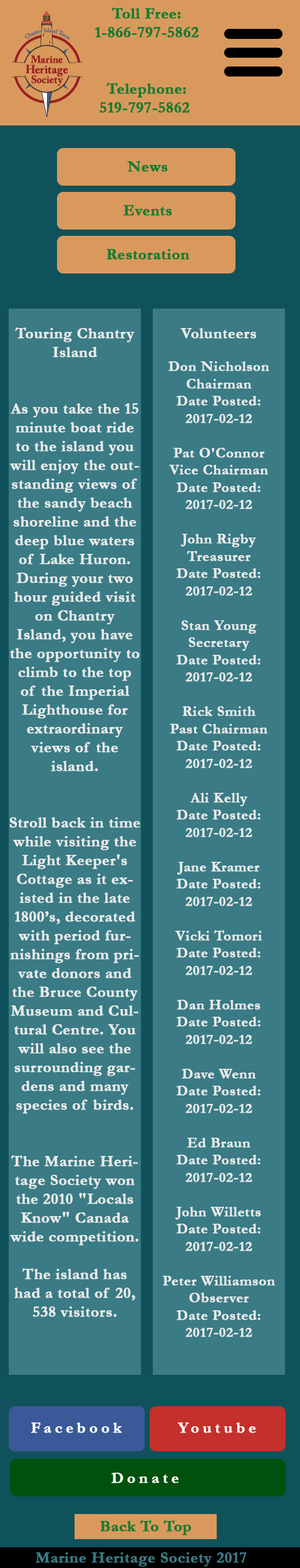
<style>
.page{position:relative;width:300px;height:1568px;background:#3a7b85}
.page>*{position:absolute;margin:0}
.t1{font:15.7px "Garamond-Bold";color:#197b30;font-weight:bold}
.t2{font:15.7px "Garamond-Bold";letter-spacing:-0.005em;color:#ebebeb;font-weight:bold}
.t3{font:14.4px "Garamond-Bold";letter-spacing:-0.005em;color:#ebebeb;font-weight:bold}
.t4{font:15.7px "Garamond-Bold";letter-spacing:0.2em;color:#fefefe;font-weight:bold}
.t5{font:15.7px "Garamond-Bold";letter-spacing:0.2em;color:#ffffff;font-weight:bold}
.t6{font:15.7px "Garamond-Bold";color:#3a7b85;font-weight:bold}
</style>
<div class="page">
<p class="t1" style="left:95px;top:8px;width:104px;height:30px;text-align:center">Toll Free:<br>1-866-797-5862</p>
<p class="t1" style="left:100px;top:83px;width:90px;height:30px;text-align:center">Telephone:<br>519-797-5862</p>
<p class="t1" style="left:127px;top:161px;width:41px;height:11px">News</p>
<p class="t1" style="left:124px;top:205px;width:48px;height:11px">Events</p>
<p class="t1" style="left:107px;top:249px;width:83px;height:11px">Restoration</p>
<p class="t2" style="left:9px;top:327px;width:131px;height:990px;text-align:center">Touring Chantry Island<br><br><br>As you take the 15 minute boat ride to the island you will enjoy the outstanding views of the sandy beach shoreline and the deep blue waters of Lake Huron. During your two hour guided visit on Chantry Island, you have the opportunity to climb to the top of the Imperial Lighthouse for extraordinary views of the island. <br><br><br>Stroll back in time while visiting the Light Keeper's Cottage as it existed in the late 1800’s, decorated with period furnishings from private donors and the Bruce County Museum and Cultural Centre. You will also see the surrounding gardens and many species of birds.<br><br><br>The Marine Heritage Society won the 2010 "Locals Know" Canada wide competition.<br><br>The island has had a total of 20, 538 visitors.</p>
<p class="t3" style="left:162px;top:328px;width:113px;height:1009px;text-align:center"><span class="t2"><br>Volunteers<br><br></span>Don Nicholson<br>Chairman<br>Date Posted: 2017-02-12<br><br>Pat O'Connor<br>Vice Chairman<br>Date Posted: 2017-02-12<br><br>John Rigby<br>Treasurer<br>Date Posted: 2017-02-12<br><br>Stan Young<br>Secretary<br>Date Posted: 2017-02-12<br><br>Rick Smith<br>Past Chairman<br>Date Posted: 2017-02-12<br><br>Ali Kelly<br>Date Posted: 2017-02-12<br><br>Jane Kramer<br>Date Posted: 2017-02-12<br><br>Vicki Tomori<br>Date Posted: 2017-02-12<br><br>Dan Holmes<br>Date Posted: 2017-02-12<br><br>Dave Wenn<br>Date Posted: 2017-02-12<br><br>Ed Braun<br>Date Posted: 2017-02-12<br><br>John Willetts<br>Date Posted: 2017-02-12<br><br>Peter Williamson<br>Observer<br>Date Posted: 2017-02-12</p>
<p class="t4" style="left:31px;top:1422px;width:91px;height:11px">Facebook</p>
<p class="t5" style="left:177px;top:1422px;width:80px;height:11px">Youtube</p>
<p class="t5" style="left:112px;top:1473px;width:67px;height:10px">Donate</p>
<p class="t1" style="left:100px;top:1520px;width:91px;height:15px">Back To Top</p>
<p class="t6" style="left:36px;top:1552px;width:211px;height:15px">Marine Heritage Society 2017</p>
</div>
